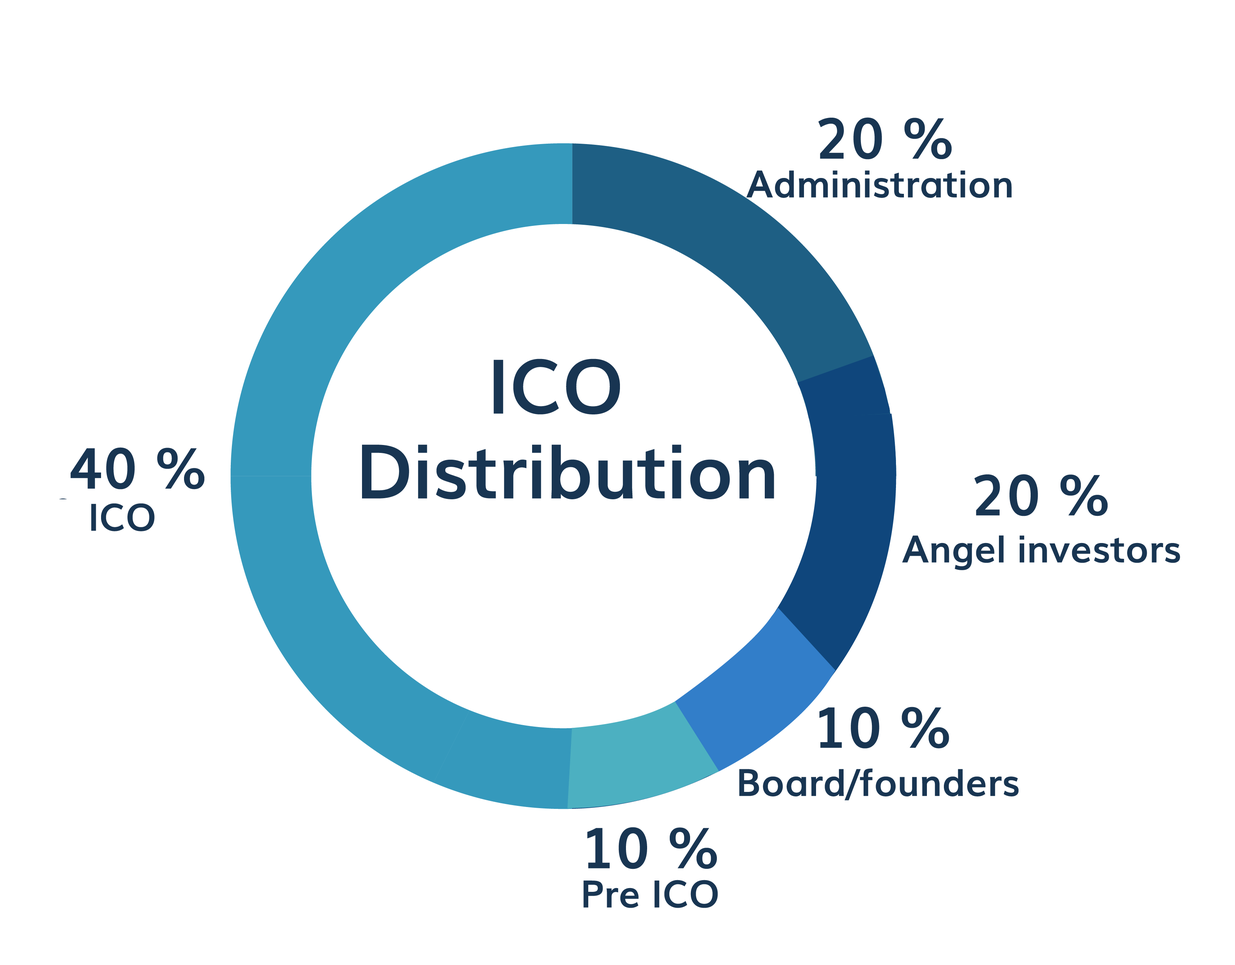
<style>
.page{position:relative;width:1235px;height:965px;background:#ffffff}
.page>*{position:absolute;margin:0}
.t1{font:56.6px "Muli-Bold";color:#183552}
.t2{font:37.7px "Muli-Bold";color:#183552}
.t3{font:75.4px/42.4px "Muli-Bold";color:#183552}
</style>
<div class="page">
<p class="t1" style="left:819px;top:117px;width:133px;height:43px">20 %</p>
<p class="t2" style="left:746px;top:170px;width:266px;height:28px">Administration</p>
<p class="t3" style="left:362px;top:359px;width:412px;height:140px;text-align:center">ICO<br><br> Distribution</p>
<p class="t1" style="left:71px;top:447px;width:133px;height:43px">40 %</p>
<p class="t1" style="left:975px;top:474px;width:133px;height:42px">20 %</p>
<p class="t2" style="left:91px;top:504px;width:64px;height:27px">ICO</p>
<p class="t2" style="left:902px;top:536px;width:279px;height:34px">Angel investors</p>
<p class="t1" style="left:820px;top:707px;width:129px;height:42px">10 %</p>
<p class="t2" style="left:739px;top:769px;width:280px;height:32px">Board/founders</p>
<p class="t1" style="left:587px;top:827px;width:130px;height:42px">10 %</p>
<p class="t2" style="left:584px;top:880px;width:134px;height:28px">Pre ICO</p>
</div>
